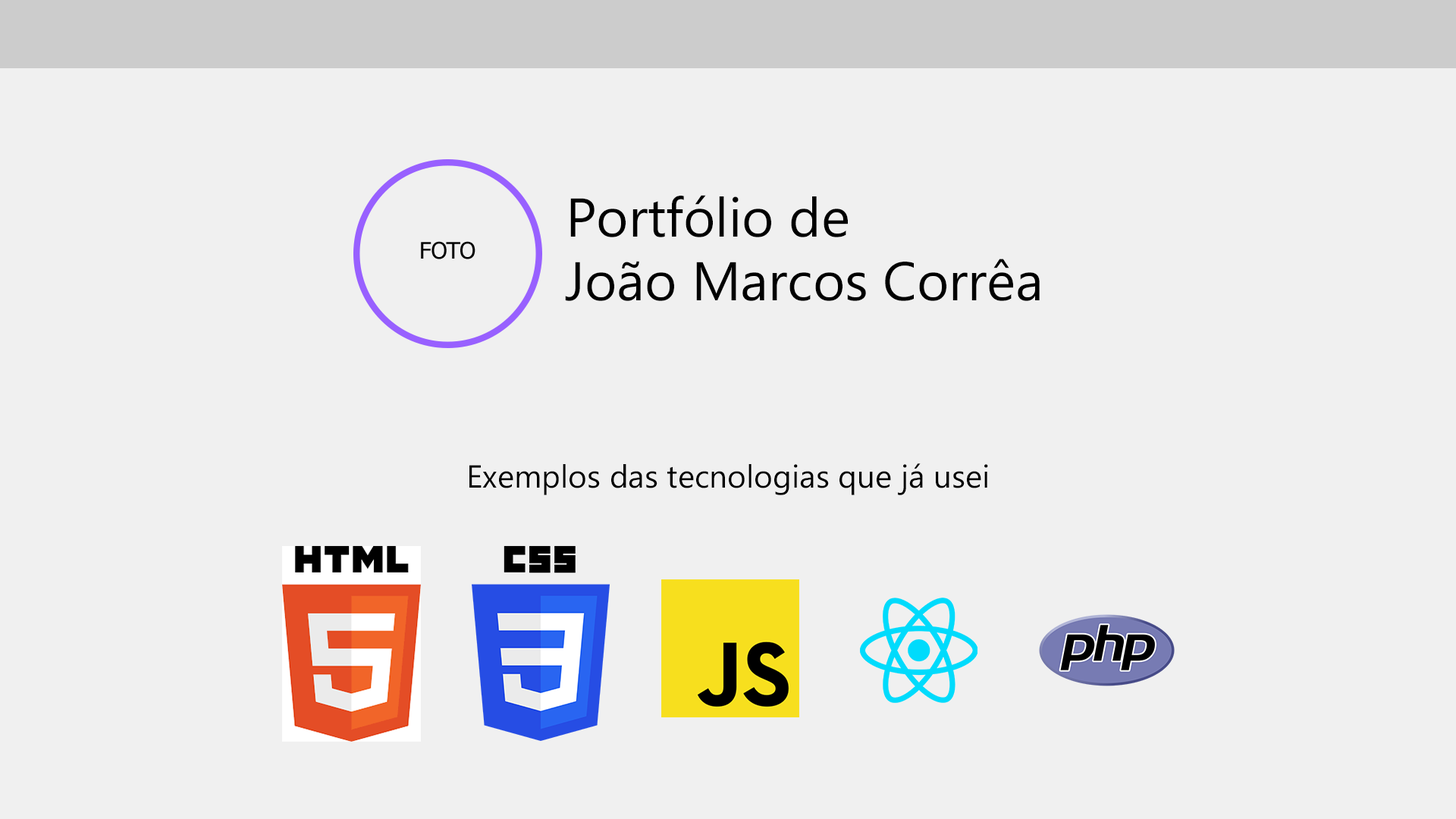
<style>
.page{position:relative;width:1456px;height:819px;background:#f0f0f0}
.page>*{position:absolute;margin:0}
.t1{font:54.5px "Ebrima";color:#000000}
.t2{font:31.8px "Ebrima";color:#000000}
</style>
<div class="page">
<p class="t1" style="left:570px;top:195px;width:278px;height:42px">Portfólio de</p>
<p class="t1" style="left:565px;top:259px;width:475px;height:42px">João Marcos Corrêa</p>
<p class="t2" style="left:469px;top:463px;width:519px;height:32px">Exemplos das tecnologias que já usei</p>
</div>
